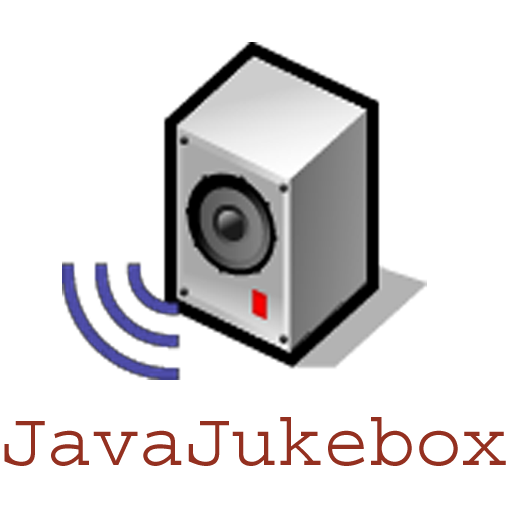
<style>
.page{position:relative;width:512px;height:512px;background:#ffffff}
.page>*{position:absolute;margin:0}
.t1{font:76.8px "Courier";color:#943020}
</style>
<div class="page">
<p class="t1" style="left:4px;top:417px;width:502px;height:49px">JavaJukebox</p>
</div>
